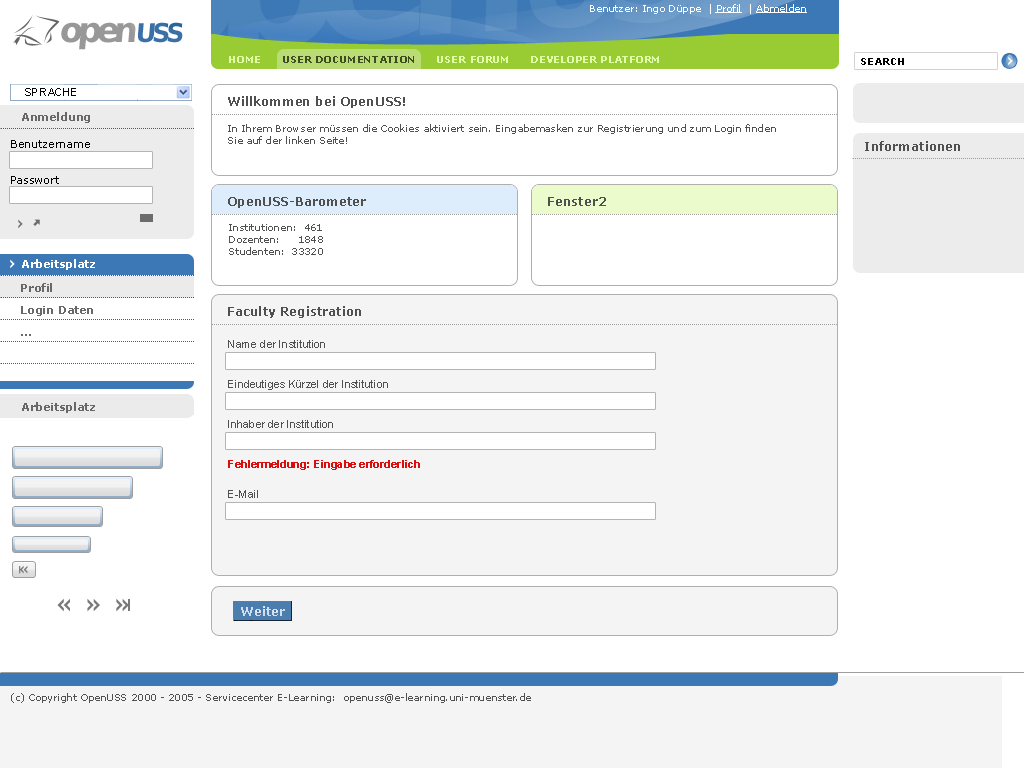
<style>
.page{position:relative;width:1024px;height:768px;background:#ffffff}
.page>*{position:absolute;margin:0}
.t1{font:10px "Verdana";color:#ffffff}
.t2{font:10px "Verdana";color:#ffffff;text-decoration:underline}
.t3{font:34.4px "BitstreamVeraSans-Bold";letter-spacing:-0.15em;color:#989898}
.t4{font:34.4px "BitstreamVeraSans-Bold";letter-spacing:-0.08em;color:#989898}
.t5{font:25.8px "BitstreamVeraSans-Bold";letter-spacing:-0.14em;color:#2a649f}
.t6{font:25.8px "BitstreamVeraSans-Bold";letter-spacing:-0.12em;color:#2a649f}
.t7{font:10px "Verdana-Bold";color:#e1ffa5}
.t8{font:10px "Verdana-Bold";color:#3e4d20}
.t9{font:10px "Verdana-Bold";color:#000000}
.t10{font:11px "ArialMT";color:#000000}
.t11{font:12px "Verdana-Bold";color:#505050}
.t12{font:11px "Verdana-Bold";color:#686868}
.t13{font:10px "Verdana";color:#505050}
.t14{font:11px/36px "Verdana";color:#000000}
.t15{font:11px "Verdana-Bold";color:#ffffff}
.t16{font:11px/22px "Verdana-Bold";color:#686868}
.t17{font:11px/40px "ArialMT";color:#505050}
.t18{font:11px/40px "Arial-BoldMT";color:#dc0d0d}
.t19{font:11px/30px "ArialMT";color:#505050}
</style>
<div class="page">
<p class="t1" style="left:590px;top:4px;width:217px;height:10px">Benutzer: Ingo Düppe  | <span class="t2">Profil</span>  | <span class="t2">Abmelden</span></p>
<p class="t3" style="left:61px;top:22px;width:122px;height:28px">ope<span class="t4">n</span><span class="t5">U</span><span class="t6">SS</span></p>
<p class="t7" style="left:229px;top:56px;width:430px;height:7px">HOME      <span class="t8">USER DOCUMENTATION</span>      USER FORUM      DEVELOPER PLATFORM</p>
<p class="t9" style="left:861px;top:58px;width:43px;height:7px">SEARCH</p>
<p class="t10" style="left:25px;top:88px;width:51px;height:8px">SPRACHE</p>
<p class="t11" style="left:228px;top:96px;width:177px;height:12px">Willkommen bei OpenUSS!</p>
<p class="t12" style="left:22px;top:112px;width:68px;height:11px">Anmeldung</p>
<p class="t13" style="left:228px;top:124px;width:548px;height:20px">In Ihrem Browser müssen die Cookies aktiviert sein. Eingabemasken zur Registrierung und zum Login finden <br>Sie auf der linken Seite!</p>
<p class="t14" style="left:11px;top:140px;width:79px;height:44px">Benutzername<br>Passwort</p>
<p class="t11" style="left:865px;top:141px;width:95px;height:10px">Informationen</p>
<p class="t11" style="left:228px;top:197px;width:138px;height:11px">OpenUSS-Barometer</p>
<p class="t11" style="left:548px;top:197px;width:58px;height:9px">Fenster2</p>
<p class="t13" style="left:229px;top:224px;width:94px;height:31px">Institutionen:  461<br>Dozenten:     1848<br>Studenten:  33320</p>
<p class="t15" style="left:22px;top:259px;width:73px;height:11px">Arbeitsplatz</p>
<p class="t16" style="left:21px;top:283px;width:72px;height:53px">Profil<br>Login Daten<br>...</p>
<p class="t11" style="left:228px;top:306px;width:133px;height:12px">Faculty Registration</p>
<p class="t17" style="left:228px;top:340px;width:192px;height:158px">Name der Institution<br>Eindeutiges Kürzel der Institution<br>Inhaber der Institution<br><span class="t18">Fehlermeldung: Eingabe erforderlich<br></span><span class="t19">E-Mail</span></p>
<p class="t12" style="left:22px;top:402px;width:73px;height:11px">Arbeitsplatz</p>
<p class="t13" style="left:11px;top:693px;width:520px;height:10px">(c) Copyright OpenUSS 2000 - 2005 - Servicecenter E-Learning:  openuss@e-learning.uni-muenster.de</p>
</div>
